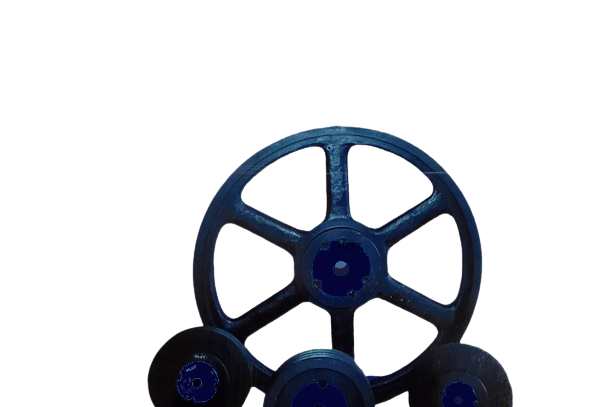
<style>
.page{position:relative;width:613px;height:407px;background:#ffffff}
.page>*{position:absolute;margin:0}
.t1{font:8px "DejaVuSerif";color:#000000}
</style>
<div class="page">
<p class="t1" style="left:337px;top:243px;width:25px;height:6px">MLET</p>
</div>
